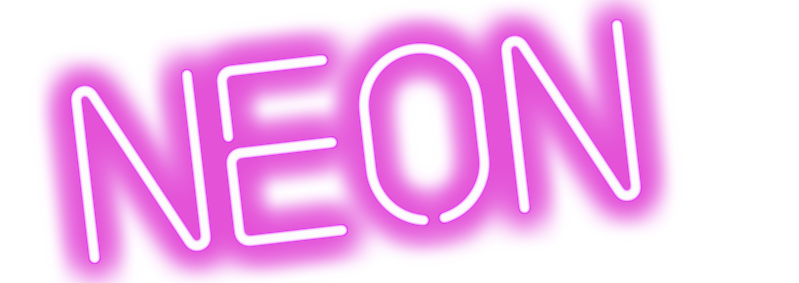
<style>
.page{position:relative;width:799px;height:283px;background:#ffffff}
.page>*{position:absolute;margin:0}
.t1{font:229.2px "NeonTubes2-Regular"}
</style>
<div class="page">
<p class="t1" style="left:70px;top:18px;width:572px;height:247px;rotate:-7deg">NEON</p>
</div>
